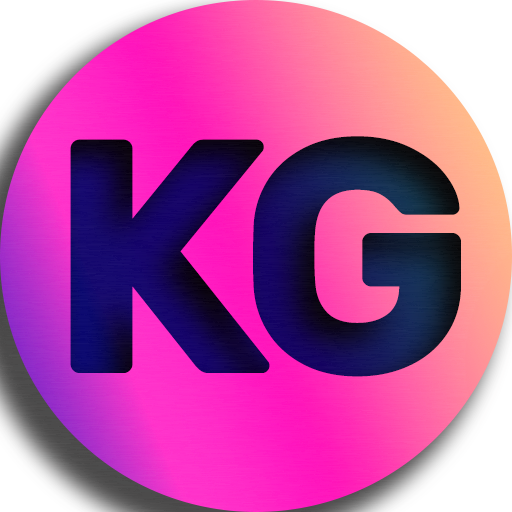
<style>
.page{position:relative;width:512px;height:512px}
.page>*{position:absolute;margin:0}
.t1{font:333.3px "Rubik-Bold";letter-spacing:-0.1em}
</style>
<div class="page">
<p class="t1" style="left:70px;top:136px;width:391px;height:241px">KG</p>
</div>
